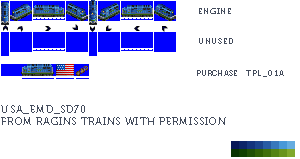
<style>
.page{position:relative;width:300px;height:159px;background:#ffffff}
.page>*{position:absolute;margin:0}
.t1{font:8px "Museo700-Regular";letter-spacing:0.075em;color:#444c5c;text-transform:uppercase}
.t2{font:8px "Museo700-Regular";color:#444c5c;text-transform:uppercase}
.t3{font:8px "Museo700-Regular";letter-spacing:0.1em;color:#444c5c;text-transform:uppercase}
.t4{font:10px "Museo700-Regular";letter-spacing:0.075em;color:#444c5c;text-transform:uppercase}
</style>
<div class="page">
<p class="t1" style="left:199px;top:8px;width:32px;height:6px">Engine</p>
<p class="t1" style="left:199px;top:38px;width:34px;height:6px">Unused</p>
<p class="t2" style="left:197px;top:70px;width:40px;height:6px">Purchase</p>
<p class="t3" style="left:246px;top:70px;width:38px;height:7px">tpl_01a</p>
<p class="t4" style="left:1px;top:105px;width:225px;height:20px">USA_EMD_SD70<br>from ragins trains with permission</p>
</div>
